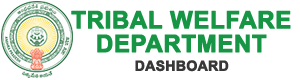
<style>
.page{position:relative;width:300px;height:80px;background:#ffffff}
.page>*{position:absolute;margin:0}
.t1{font:24px/23.7px "Arial-BoldMT";color:#169544;text-transform:uppercase;font-weight:bold}
.t2{font:14px "Arial-BoldMT";color:#383838;text-transform:uppercase;font-weight:bold}
</style>
<div class="page">
<p class="t1" style="left:71px;top:10px;width:220px;height:43px;text-align:center">Tribal Welfare<br>Department</p>
<p class="t2" style="left:135px;top:60px;width:94px;height:12px">Dashboard</p>
</div>
